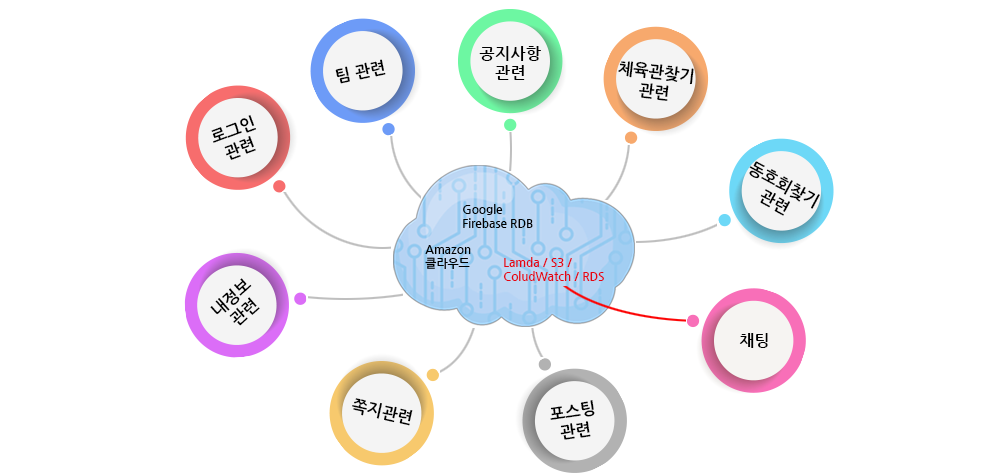
<style>
.page{position:relative;width:981px;height:476px;background:#ffffff}
.page>*{position:absolute;margin:0}
.t1{font:16.5px "NanumGothicBold";color:#000000}
.t2{font:11.8px "NanumGothicBold";color:#000000}
.t3{font:11.8px "NanumGothicBold";color:#e30613}
</style>
<div class="page">
<p class="t1" style="left:479px;top:46px;width:62px;height:34px;text-align:center">공지사항<br>관련</p>
<p class="t1" style="left:335px;top:59px;width:51px;height:25px;rotate:-12deg">팀 관련</p>
<p class="t1" style="left:618px;top:61px;width:76px;height:40px;text-align:center;rotate:7deg">체육관찾기<br>관련</p>
<p class="t1" style="left:211px;top:115px;width:45px;height:45px;text-align:center;rotate:-20deg">로그인<br>관련</p>
<p class="t1" style="left:749px;top:161px;width:71px;height:55px;text-align:center;rotate:28deg">동호회찾기<br>관련</p>
<p class="t2" style="left:463px;top:204px;width:70px;height:24px">Google<br>Firebase RDB</p>
<p class="t2" style="left:425px;top:245px;width:46px;height:24px">Amazon<br>클라우드</p>
<p class="t3" style="left:503px;top:257px;width:101px;height:24px">Lamda / S3 /<br>ColudWatch / RDS</p>
<p class="t1" style="left:210px;top:278px;width:50px;height:48px;text-align:center;rotate:-42deg">내정보<br>관련</p>
<p class="t1" style="left:739px;top:333px;width:29px;height:15px">채팅</p>
<p class="t1" style="left:352px;top:398px;width:61px;height:28px;rotate:13deg">쪽지관련</p>
<p class="t1" style="left:550px;top:400px;width:45px;height:40px;text-align:center;rotate:-8deg">포스팅<br>관련</p>
</div>
